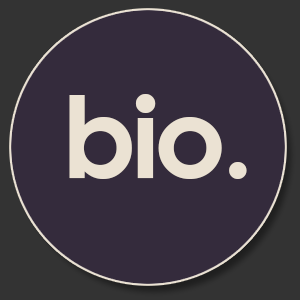
<style>
.page{position:relative;width:300px;height:300px;background:#342b3c}
.page>*{position:absolute;margin:0}
.t1{font:112.5px "CenturyGothic-Bold";letter-spacing:-0.04em;color:#ebe2d3}
</style>
<div class="page">
<p class="t1" style="left:69px;top:94px;width:178px;height:85px">bio.</p>
</div>
